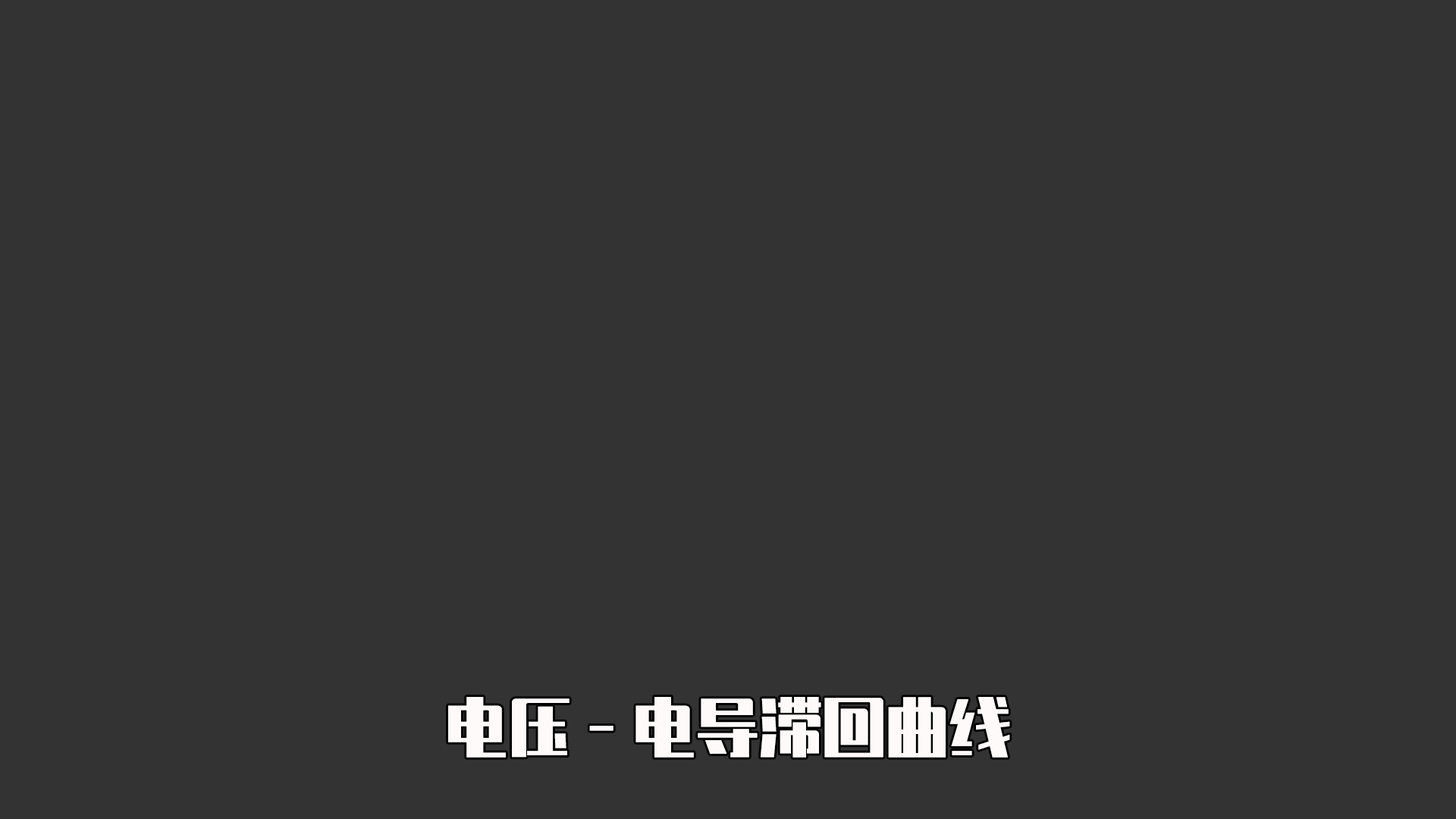
<style>
.page{position:relative;width:1456px;height:819px;background:#333333}
.page>*{position:absolute;margin:0}
.t1{font:63.2px "ZhenyanGB-Regular";color:#fefafa}
</style>
<div class="page">
<p class="t1" style="left:448px;top:697px;width:562px;height:61px">电压-电导滞回曲线</p>
</div>
